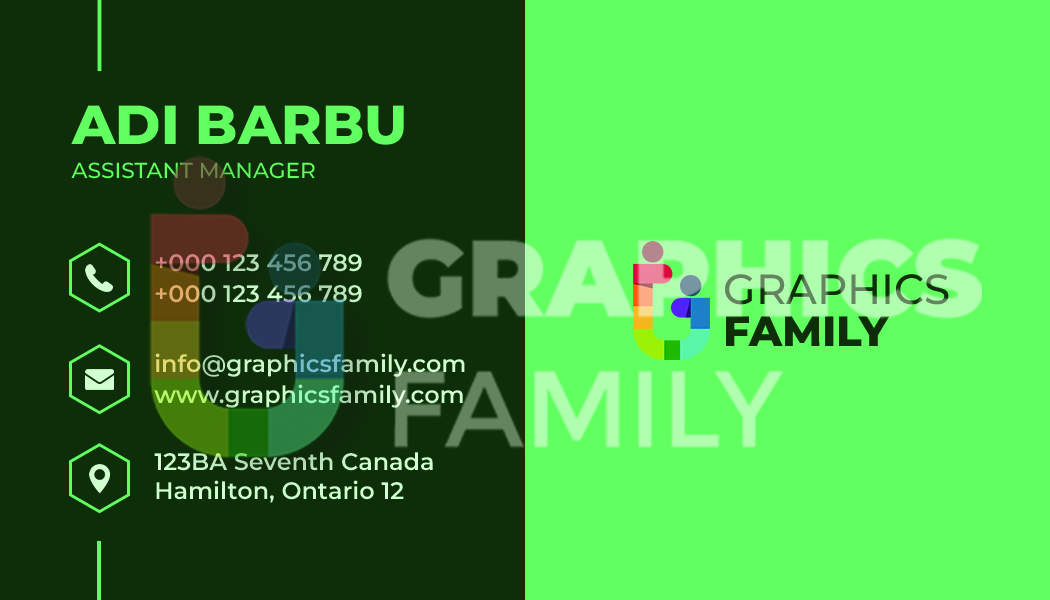
<style>
.page{position:relative;width:1050px;height:600px;background:#61ff5f}
.page>*{position:absolute;margin:0}
.t1{font:55.1px "Montserrat-ExtraBold";color:#61ff5f}
.t2{font:21.7px "Montserrat-Medium";color:#61ff5f}
.t3{font:23.8px "Montserrat-SemiBold";text-transform:uppercase}
.t4{font:42px/65.3px "Montserrat-Medium";color:#0e2e09}
.t5{font:42px/42px "Montserrat-ExtraBold";color:#0e2e09}
.t6{font:23.8px "Montserrat-SemiBold"}
.t7{font:23.8px/29.2px "Montserrat-SemiBold";color:#d1ffd1}
</style>
<div class="page">
<p class="t1" style="left:71px;top:105px;width:333px;height:40px">ADI BARBU</p>
<p class="t2" style="left:71px;top:162px;width:244px;height:17px">ASSISTANT MANAGER</p>
<p class="t3" style="left:155px;top:254px;width:207px;height:18px">+000 123 456 789</p>
<p class="t4" style="left:725px;top:274px;width:224px;height:72px;text-align:justify">GRAPHICS<br><span class="t5">FAMILY</span></p>
<p class="t3" style="left:155px;top:285px;width:207px;height:18px">+000 123 456 789</p>
<p class="t6" style="left:155px;top:353px;width:310px;height:24px">info@graphicsfamily.com</p>
<p class="t6" style="left:154px;top:384px;width:309px;height:24px">www.graphicsfamily.com</p>
<p class="t7" style="left:154px;top:452px;width:279px;height:51px">123BA Seventh Canada<br>Hamilton, Ontario 12</p>
</div>
